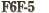
<style>
.page{position:relative;width:49px;height:13px;background:#ffffff}
.page>*{position:absolute;margin:0}
.t1{font:15px "RyuminPro-ExBold";letter-spacing:-0.06em;color:#4a3f32;font-weight:bold;scale:0.9 1}
</style>
<div class="page">
<p class="t1" style="left:1px;top:1px;width:34px;height:12px">F6F-5</p>
</div>
